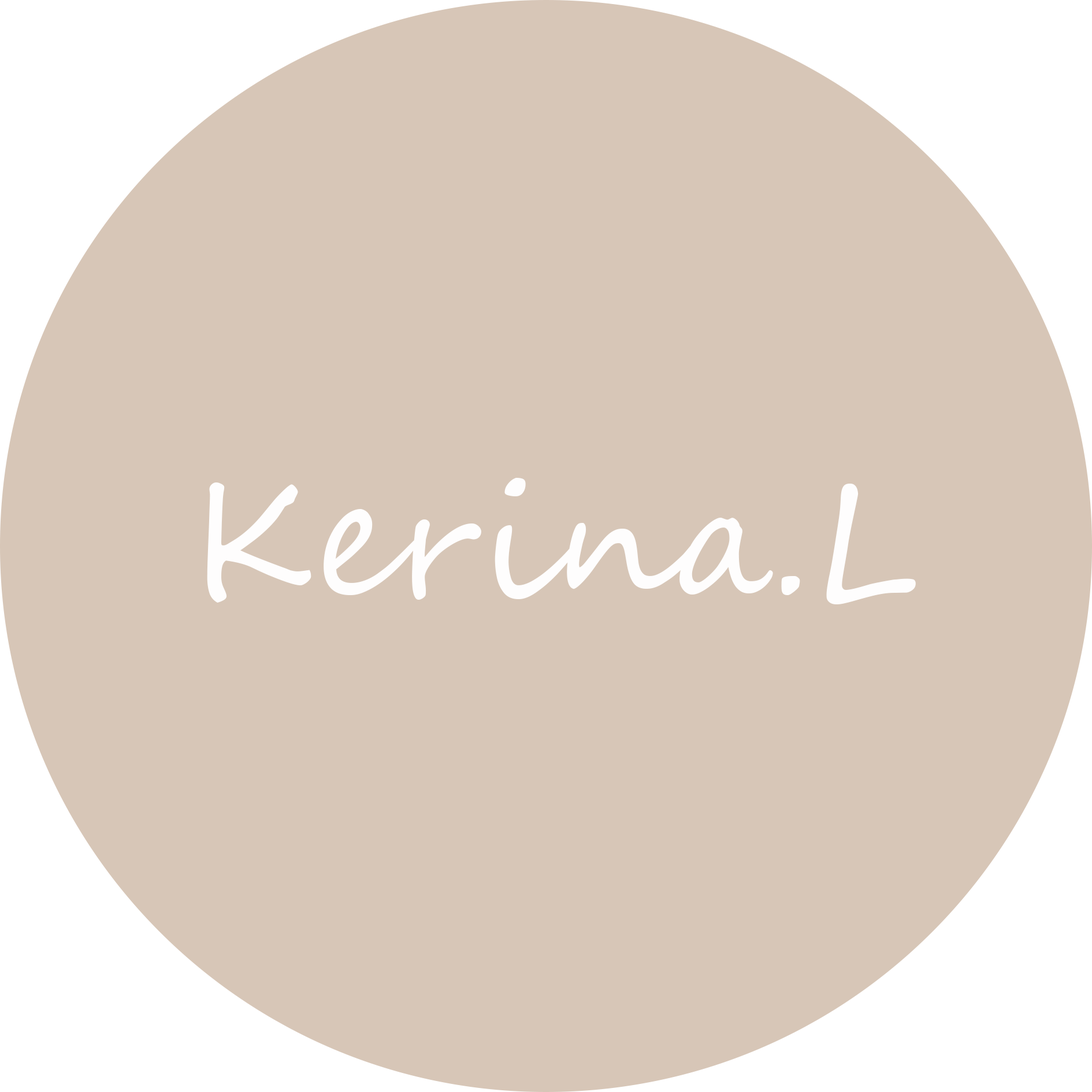
<style>
.page{position:relative;width:1092px;height:1092px;background:#d7c6b7}
.page>*{position:absolute;margin:0}
.t1{font:159px "SegoeScript";color:#fefdfd}
</style>
<div class="page">
<p class="t1" style="left:207px;top:478px;width:709px;height:126px">Kerina.L</p>
</div>
